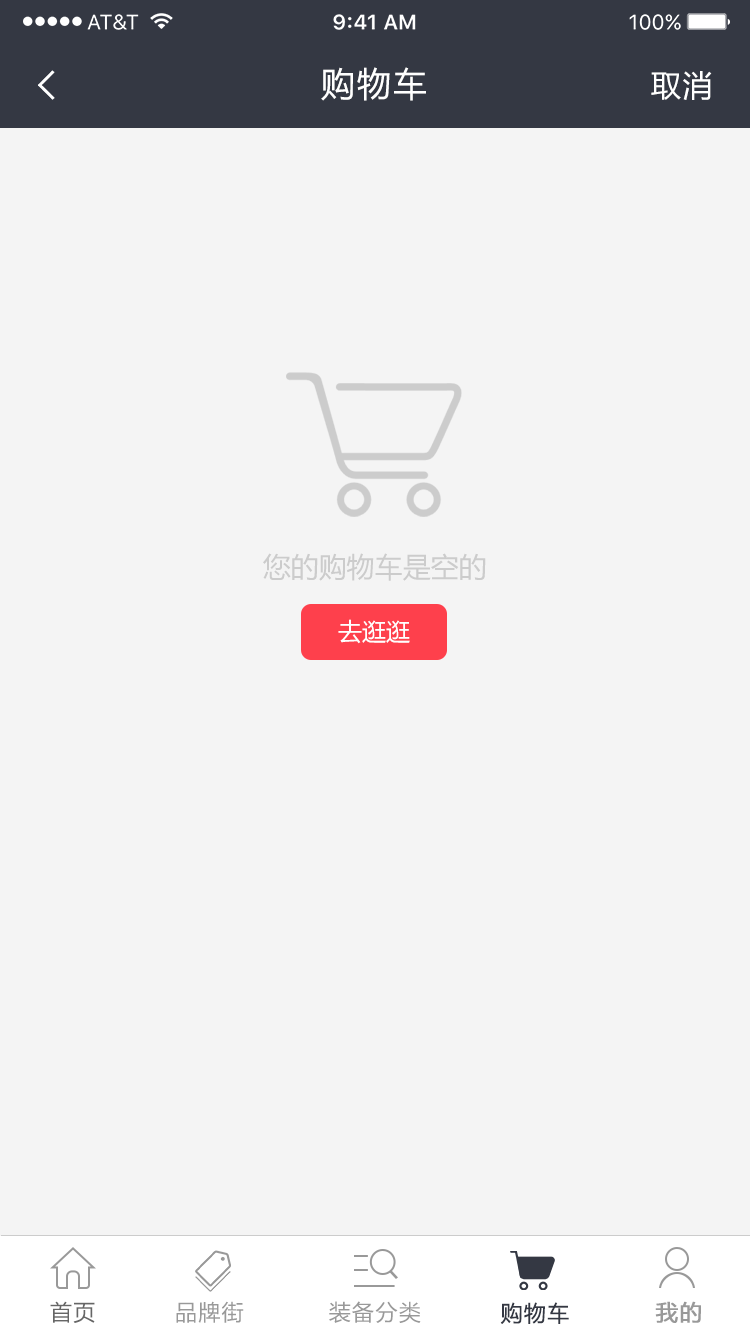
<style>
.page{position:relative;width:750px;height:1334px;background:#f4f4f4}
.page>*{position:absolute;margin:0}
.t1{font:34px "MicrosoftYaHei";letter-spacing:0.06em;color:#ffffff}
.t2{font:30px "MicrosoftYaHei";letter-spacing:0.06em;color:#ffffff}
.t3{font:28px "MicrosoftYaHei";color:#cccccc}
.t4{font:24px "MicrosoftYaHei";color:#ffffff}
.t5{font:22px "MicrosoftYaHei";letter-spacing:0.06em;color:#666666}
.t6{font:22px "MicrosoftYaHei";letter-spacing:0.06em;color:#999999}
.t7{font:22px "MicrosoftYaHei";letter-spacing:0.06em;color:#343843}
.t8{font:22px "MicrosoftYaHei";letter-spacing:0.06em;color:#999999;font-weight:bold}
</style>
<div class="page">
<p class="t1" style="left:321px;top:67px;width:105px;height:34px">购物车</p>
<p class="t2" style="left:651px;top:71px;width:61px;height:29px">取消</p>
<p class="t3" style="left:263px;top:553px;width:223px;height:28px">您的购物车是空的</p>
<p class="t4" style="left:338px;top:619px;width:72px;height:25px">去逛逛</p>
<p class="t4" style="left:338px;top:619px;width:72px;height:25px">去逛逛</p>
<p class="t5" style="left:50px;top:1301px;width:45px;height:22px">首页</p>
<p class="t6" style="left:176px;top:1301px;width:68px;height:22px">品牌街</p>
<p class="t6" style="left:329px;top:1301px;width:92px;height:22px">装备分类</p>
<p class="t7" style="left:500px;top:1302px;width:69px;height:22px">购物车</p>
<p class="t8" style="left:655px;top:1301px;width:46px;height:22px">我的</p>
</div>
